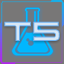
<style>
.page{position:relative;width:64px;height:64px;background:#787777}
.page>*{position:absolute;margin:0}
.t1{font:24px "MassEffect123"}
</style>
<div class="page">
<p class="t1" style="left:4px;top:21px;width:56px;height:20px">T5</p>
</div>
